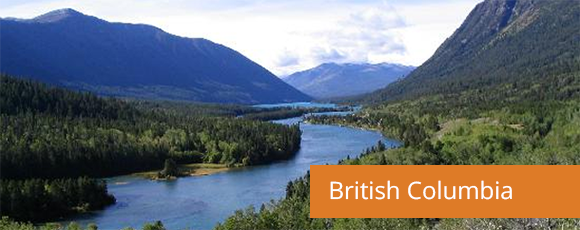
<style>
.page{position:relative;width:580px;height:230px}
.page>*{position:absolute;margin:0}
.t1{font:24px "OpenSans";color:#ffffff}
</style>
<div class="page">
<p class="t1" style="left:330px;top:180px;width:182px;height:20px">British Columbia</p>
</div>
